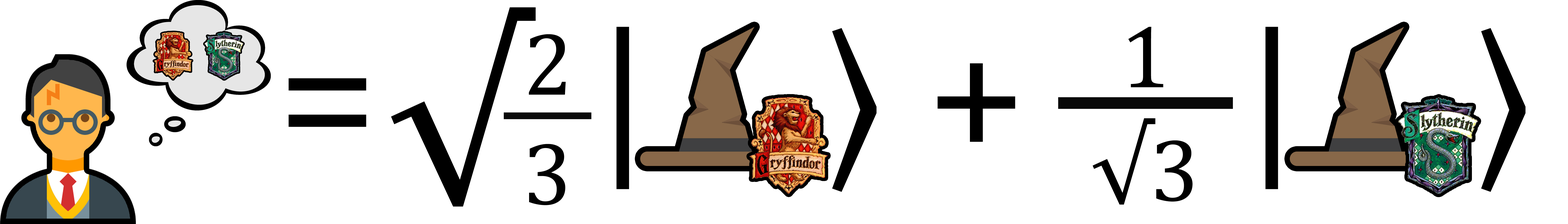
<style>
.page{position:relative;width:1568px;height:224px;background:#ffffff}
.page>*{position:absolute;margin:0}
.t1{font:206.9px "Cambria";color:#000000}
.t2{font:179.2px "Cambria";color:#000000}
.t3{font:179.2px "SitkaSmall-Italic";color:#000000}
.t4{font:89.6px "Cambria";color:#000000}
</style>
<div class="page">
<p class="t1" style="left:391px;top:7px;width:145px;height:200px">√</p>
<p class="t2" style="left:289px;top:27px;width:1237px;height:165px">=     <span class="t3">|</span>    ⟩ +     <span class="t3">|</span>    ⟩</p>
<p class="t4" style="left:1128px;top:27px;width:35px;height:60px">1</p>
<p class="t4" style="left:529px;top:34px;width:37px;height:61px">2</p>
<p class="t4" style="left:1093px;top:118px;width:100px;height:87px">√3</p>
<p class="t4" style="left:529px;top:144px;width:36px;height:61px">3</p>
</div>
